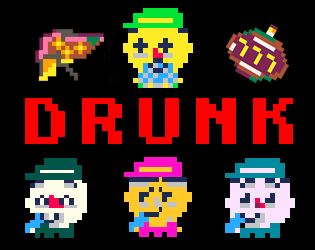
<style>
.page{position:relative;width:315px;height:250px;background:#000000}
.page>*{position:absolute;margin:0}
.t1{font:53.1px "pypx-B";letter-spacing:0.2em;color:#ff0000}
</style>
<div class="page">
<p class="t1" style="left:25px;top:98px;width:268px;height:46px">DRUNK</p>
</div>
